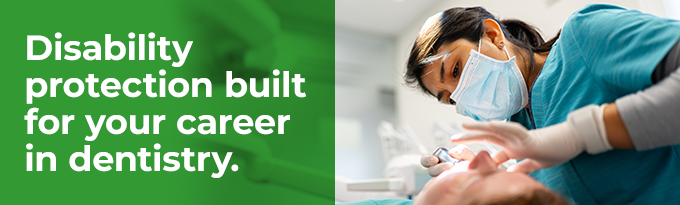
<style>
.page{position:relative;width:680px;height:205px}
.page>*{position:absolute;margin:0}
.t1{font:35px/37px "Montserrat-Bold";color:#ffffff}
</style>
<div class="page">
<p class="t1" style="left:24px;top:32px;width:282px;height:146px">Disability protection built for your career <br>in dentistry.</p>
</div>
